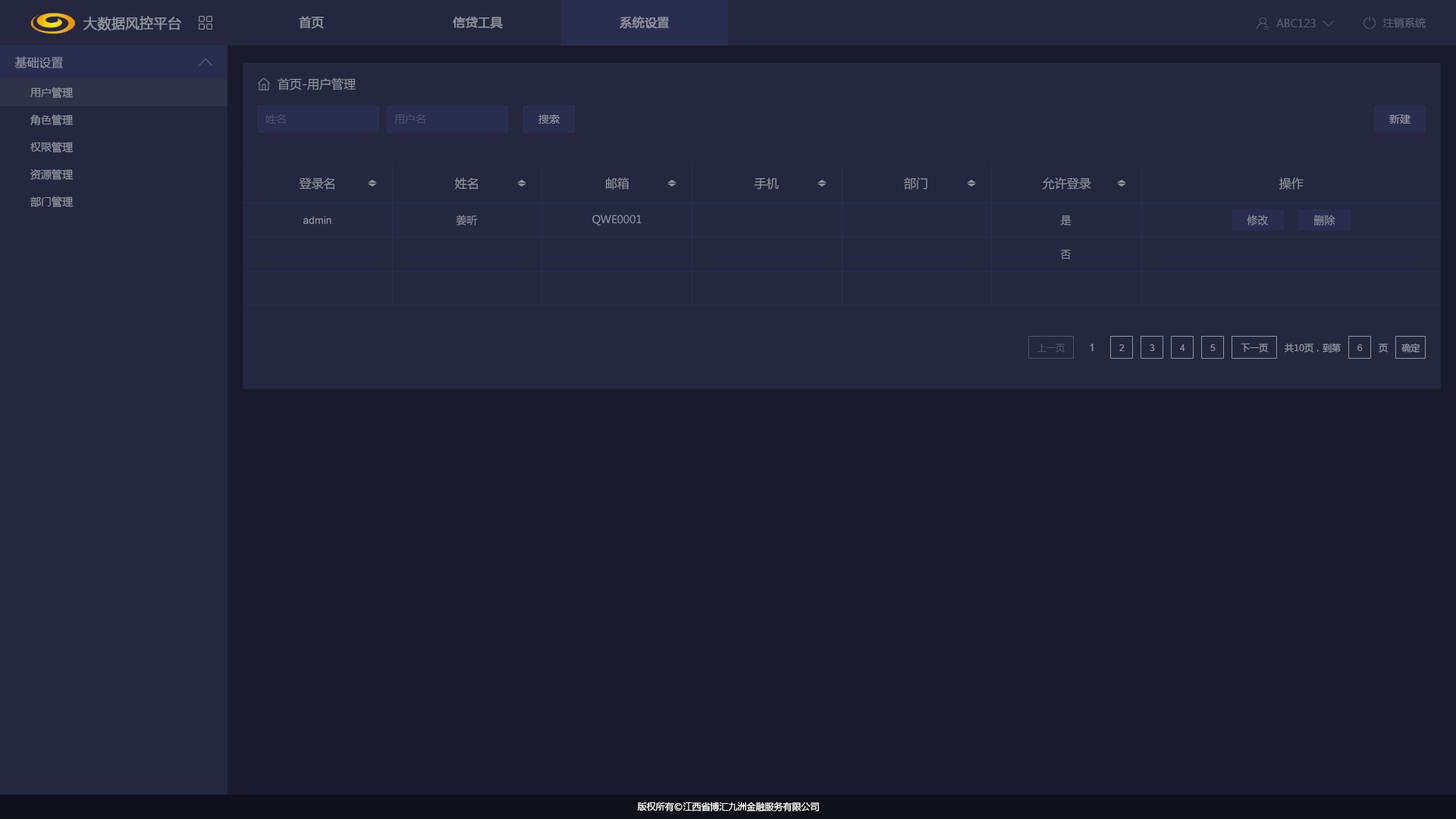
<style>
.page{position:relative;width:1456px;height:819px;background:#191a2c}
.page>*{position:absolute;margin:0}
.t1{font:13.6px "MicrosoftYaHei";color:#92939f;font-weight:bold}
.t2{font:12.1px "MicrosoftYaHei";color:#92939f;font-weight:bold}
.t3{font:10.6px "MicrosoftYaHei";color:#5c6076}
.t4{font:12.1px "MicrosoftYaHei";color:#92939f}
.t5{font:10.6px "MicrosoftYaHei";color:#92939f}
.t6{font:10.6px "MicrosoftYaHei";color:#4d5068}
.t7{font:10.6px "ArialMT";color:#92939f}
.t8{font:9.1px "MicrosoftYaHei";color:#4d5068}
.t9{font:9.1px "ArialMT";color:#92939f}
.t10{font:9.1px "MicrosoftYaHei";color:#92939f}
.t11{font:9.1px "MicrosoftYaHei";color:#ffffff}
</style>
<div class="page">
<p class="t1" style="left:83px;top:16px;width:98px;height:15px">大数据风控平台</p>
<p class="t2" style="left:299px;top:16px;width:25px;height:13px">首页</p>
<p class="t2" style="left:453px;top:17px;width:50px;height:12px">信贷工具</p>
<p class="t2" style="left:620px;top:16px;width:50px;height:13px">系统设置</p>
<p class="t3" style="left:1383px;top:17px;width:43px;height:11px">注销系统</p>
<p class="t3" style="left:1276px;top:19px;width:40px;height:8px">ABC123</p>
<p class="t4" style="left:14px;top:56px;width:49px;height:12px">基础设置</p>
<p class="t5" style="left:30px;top:87px;width:44px;height:12px">用户管理</p>
<p class="t4" style="left:278px;top:78px;width:78px;height:12px">首页-用户管理</p>
<p class="t5" style="left:30px;top:115px;width:44px;height:11px">角色管理</p>
<p class="t6" style="left:265px;top:115px;width:21px;height:9px">姓名</p>
<p class="t6" style="left:394px;top:115px;width:31px;height:9px">用户名</p>
<p class="t5" style="left:538px;top:115px;width:22px;height:9px">搜索</p>
<p class="t5" style="left:1389px;top:115px;width:21px;height:9px">新建</p>
<p class="t5" style="left:30px;top:142px;width:44px;height:11px">权限管理</p>
<p class="t5" style="left:30px;top:169px;width:44px;height:11px">资源管理</p>
<p class="t4" style="left:299px;top:177px;width:35px;height:13px">登录名</p>
<p class="t4" style="left:455px;top:177px;width:23px;height:13px">姓名</p>
<p class="t4" style="left:606px;top:177px;width:23px;height:13px">邮箱</p>
<p class="t4" style="left:755px;top:177px;width:24px;height:13px">手机</p>
<p class="t4" style="left:904px;top:177px;width:23px;height:13px">部门</p>
<p class="t4" style="left:1042px;top:177px;width:49px;height:13px">允许登录</p>
<p class="t4" style="left:1279px;top:177px;width:25px;height:13px">操作</p>
<p class="t5" style="left:30px;top:196px;width:44px;height:12px">部门管理</p>
<p class="t7" style="left:303px;top:216px;width:28px;height:8px">admin</p>
<p class="t5" style="left:456px;top:215px;width:22px;height:10px">姜昕</p>
<p class="t5" style="left:592px;top:215px;width:50px;height:11px">QWE0001</p>
<p class="t5" style="left:1060px;top:215px;width:12px;height:11px">是</p>
<p class="t5" style="left:1247px;top:215px;width:22px;height:11px">修改</p>
<p class="t5" style="left:1313px;top:215px;width:22px;height:11px">删除</p>
<p class="t5" style="left:1060px;top:249px;width:11px;height:10px">否</p>
<p class="t8" style="left:1037px;top:344px;width:28px;height:9px">上一页</p>
<p class="t7" style="left:1090px;top:344px;width:4px;height:7px">1</p>
<p class="t9" style="left:1119px;top:344px;width:6px;height:7px">2</p>
<p class="t9" style="left:1150px;top:344px;width:5px;height:7px">3</p>
<p class="t9" style="left:1180px;top:344px;width:5px;height:7px">4</p>
<p class="t9" style="left:1210px;top:344px;width:6px;height:7px">5</p>
<p class="t10" style="left:1241px;top:344px;width:27px;height:9px">下一页</p>
<p class="t10" style="left:1285px;top:343px;width:56px;height:10px">共10页，到第</p>
<p class="t9" style="left:1357px;top:344px;width:6px;height:7px">6</p>
<p class="t10" style="left:1379px;top:344px;width:9px;height:9px">页</p>
<p class="t10" style="left:1401px;top:343px;width:19px;height:10px">确定</p>
<p class="t11" style="left:637px;top:802px;width:182px;height:9px">版权所有©江西省博汇九洲金融服务有限公司</p>
</div>
